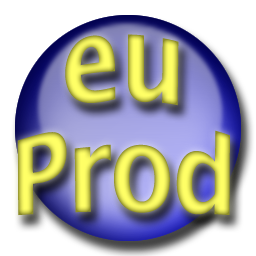
<style>
.page{position:relative;width:256px;height:256px;background:#ffffff}
.page>*{position:absolute;margin:0}
.t1{font:100px/91.7px "LucidaSans-Demi"}
</style>
<div class="page">
<p class="t1" style="left:17px;top:34px;width:213px;height:182px;text-align:center">eu<br>Prod</p>
</div>
